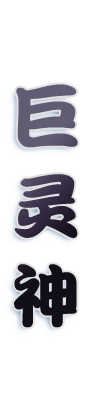
<style>
.page{position:relative;width:89px;height:402px;background:#ffffff}
.page>*{position:absolute;margin:0}
.t1{font:70px/18px "DFPKanTingLiuW9"}
</style>
<div class="page">
<p class="t1" style="left:14px;top:84px;width:64px;height:244px">巨<br><br><br><br><br>灵<br><br><br><br><br>神</p>
</div>
